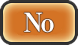
<style>
.page{position:relative;width:78px;height:45px}
.page>*{position:absolute;margin:0}
.t1{font:26px "RyuminPro-ExBold";letter-spacing:-0.08em;color:#ffffff}
</style>
<div class="page">
<p class="t1" style="left:24px;top:12px;width:30px;height:21px">No</p>
</div>
